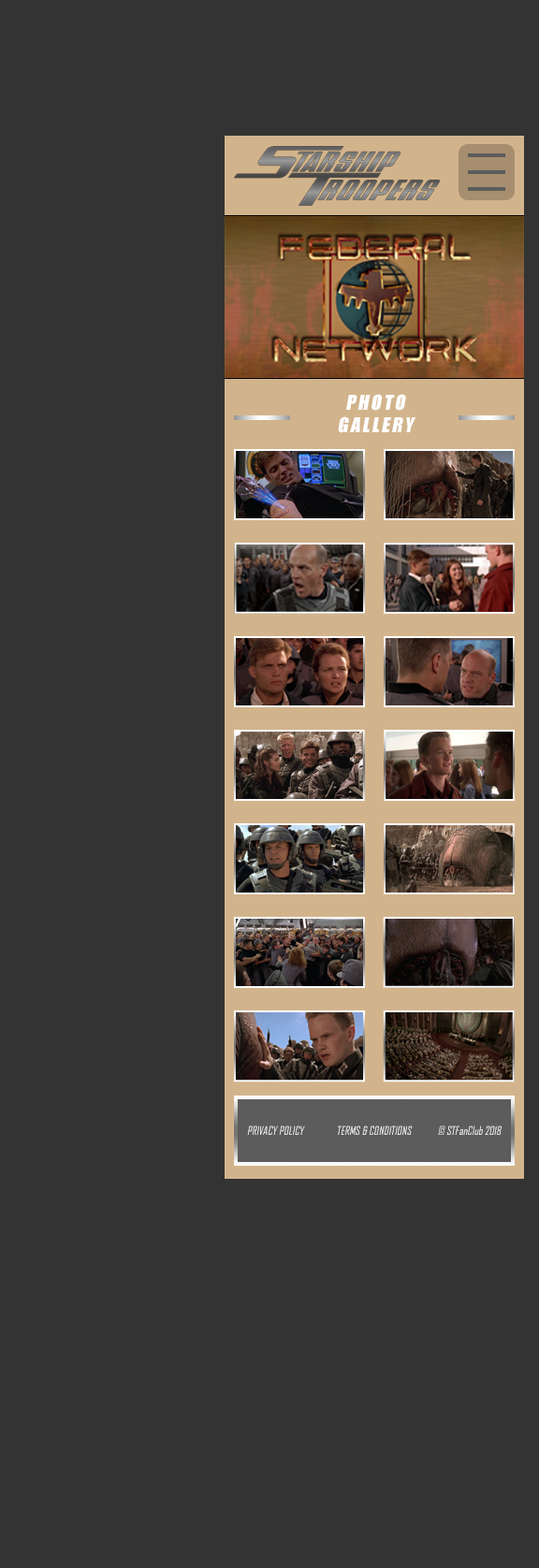
<style>
.page{position:relative;width:539px;height:1568px;background:#333333}
.page>*{position:absolute;margin:0}
.t1{font:19px "Impact";letter-spacing:0.125em;color:#fefefe;font-style:italic}
.t2{font:11.2px "AgencyFB-Reg";color:#ffffff;font-style:italic}
</style>
<div class="page">
<p class="t1" style="left:338px;top:394px;width:77px;height:39px;text-align:center">PHOTO<br>GALLERY</p>
<p class="t2" style="left:247px;top:1125px;width:254px;height:10px">PRIVACY POLICY             TERMS &amp; CONDITIONS            © STFanClub 2018</p>
</div>
